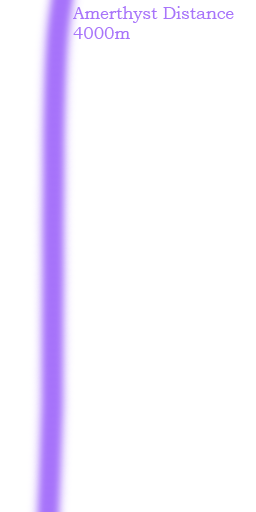
<style>
.page{position:relative;width:256px;height:512px;background:#ffffff}
.page>*{position:absolute;margin:0}
.t1{font:16.7px "BookmanOldStyle";color:#a875fa}
</style>
<div class="page">
<p class="t1" style="left:73px;top:6px;width:161px;height:33px">Amerthyst Distance<br>4000m</p>
</div>
